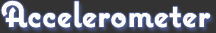
<style>
.page{position:relative;width:216px;height:33px;background:#333333}
.page>*{position:absolute;margin:0}
.t1{font:36px "CoquetteBold";color:#ffffff}
</style>
<div class="page">
<p class="t1" style="left:1px;top:0px;width:210px;height:28px">Accelerometer</p>
</div>
